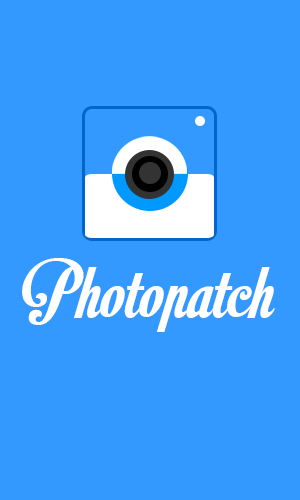
<style>
.page{position:relative;width:300px;height:500px;background:#3399ff}
.page>*{position:absolute;margin:0}
.t1{font:83.4px "MotionPicturePersonalUse";color:#ffffff}
</style>
<div class="page">
<p class="t1" style="left:22px;top:258px;width:253px;height:74px">Photopatch</p>
</div>
